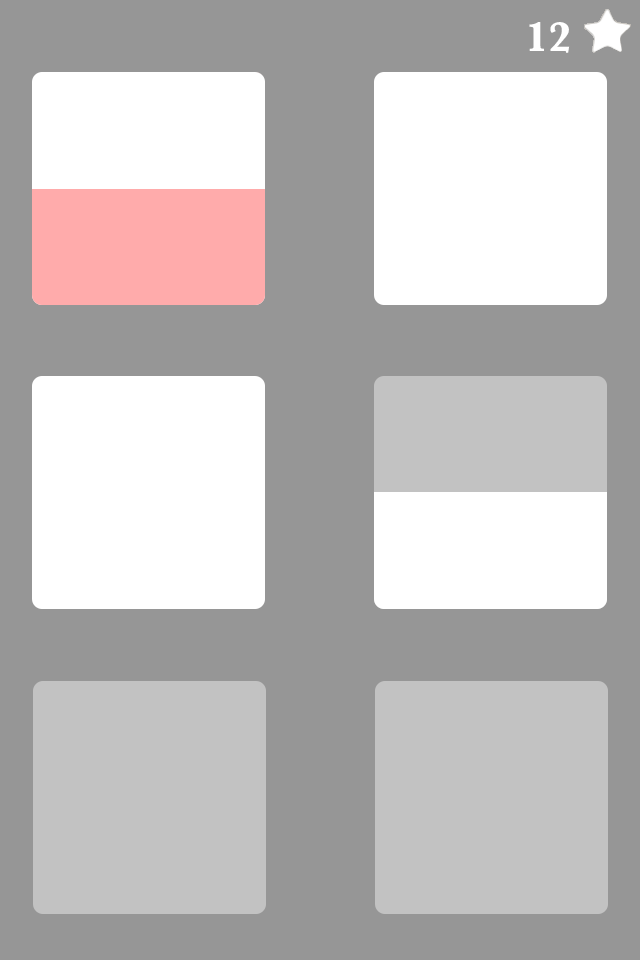
<style>
.page{position:relative;width:640px;height:960px;background:#969696}
.page>*{position:absolute;margin:0}
.t1{font:43px "Baskerville-Bold";color:#ffffff;text-transform:uppercase}
</style>
<div class="page">
<p class="t1" style="left:529px;top:22px;width:41px;height:31px">12</p>
</div>
